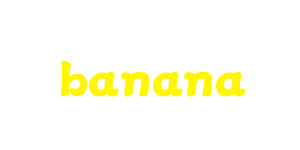
<style>
.page{position:relative;width:300px;height:150px;background:#ffffff}
.page>*{position:absolute;margin:0}
.t1{font:48px "Yj-BACDOO-Bold";color:#fff600}
</style>
<div class="page">
<p class="t1" style="left:60px;top:60px;width:186px;height:37px">banana</p>
</div>
